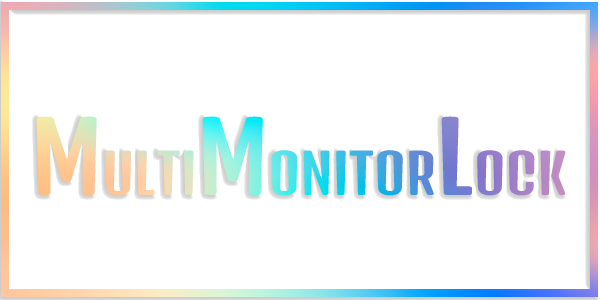
<style>
.page{position:relative;width:600px;height:300px;background:#ffffff}
.page>*{position:absolute;margin:0}
.t1{font:95px "DenkOne-Regular";font-variant:small-caps}
</style>
<div class="page">
<p class="t1" style="left:36px;top:116px;width:530px;height:80px">MultiMonitorLock</p>
</div>
